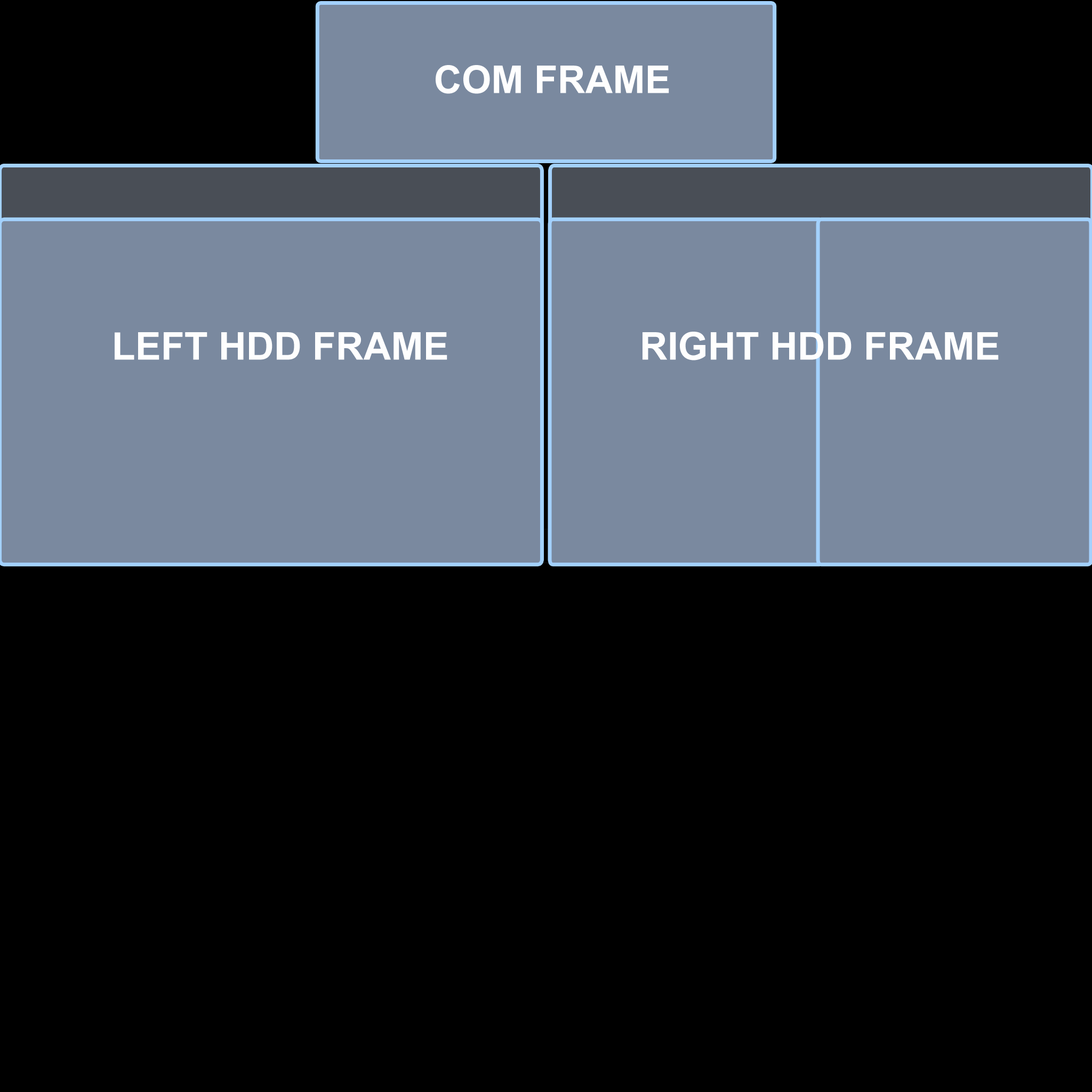
<style>
.page{position:relative;width:1092px;height:1092px;background:#000000}
.page>*{position:absolute;margin:0}
.t1{font:38.4px "Arial-BoldMT";color:#fefefe}
</style>
<div class="page">
<p class="t1" style="left:436px;top:65px;width:233px;height:29px">COM FRAME</p>
<p class="t1" style="left:115px;top:332px;width:332px;height:28px">LEFT HDD FRAME</p>
<p class="t1" style="left:643px;top:332px;width:356px;height:28px">RIGHT HDD FRAME</p>
</div>
